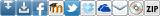
<style>
.page{position:relative;width:160px;height:16px}
.page>*{position:absolute;margin:0}
.t1{font:9.1px "TwCenMT-Bold";color:#000000}
</style>
<div class="page">
<p class="t1" style="left:146px;top:6px;width:12px;height:6px">ZIP</p>
</div>
